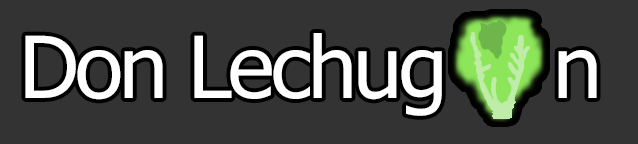
<style>
.page{position:relative;width:638px;height:144px;background:#333333}
.page>*{position:absolute;margin:0}
.t1{font:85.4px "Tahoma";letter-spacing:-0.04em;color:#ffffff}
</style>
<div class="page">
<p class="t1" style="left:25px;top:33px;width:417px;height:83px">Don Lechug</p>
<p class="t1" style="left:558px;top:50px;width:39px;height:48px">n</p>
</div>
